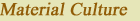
<style>
.page{position:relative;width:140px;height:21px;background:#e6e6b8}
.page>*{position:absolute;margin:0}
.t1{font:18px "TimesNewRomanPSMT";color:#915c07;font-weight:bold;font-style:italic}
</style>
<div class="page">
<p class="t1" style="left:0px;top:2px;width:128px;height:14px">Material Culture</p>
</div>
